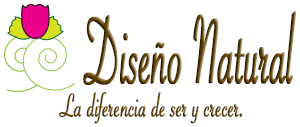
<style>
.page{position:relative;width:300px;height:127px;background:#ffffff}
.page>*{position:absolute;margin:0}
.t1{font:102.3px "SavoyeLetPlain";letter-spacing:-0.01em;font-weight:bold;scale:0.48 1}
.t2{font:34.8px "SavoyeLetPlain";letter-spacing:-0.01em;font-weight:bold;scale:0.69 1}
</style>
<div class="page">
<p class="t1" style="left:83px;top:11px;width:213px;height:74px">Diseño Natural</p>
<p class="t2" style="left:59px;top:92px;width:184px;height:32px">La diferencia de ser y crecer.</p>
</div>
